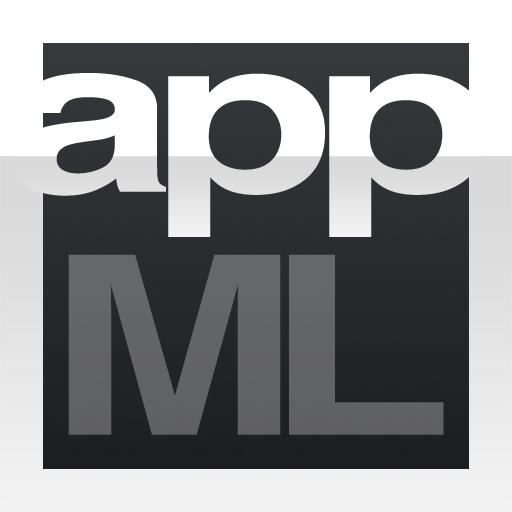
<style>
.page{position:relative;width:512px;height:512px}
.page>*{position:absolute;margin:0}
.t1{font:216.6px "Helvetica-Bold";letter-spacing:-0.08em;scale:1.4 1}
.t2{font:249.5px "Helvetica-Bold";letter-spacing:-0.11em;color:#636366;scale:1.22 1}
</style>
<div class="page">
<p class="t1" style="left:14px;top:73px;width:472px;height:164px">app</p>
<p class="t2" style="left:68px;top:254px;width:376px;height:181px">ML</p>
</div>
